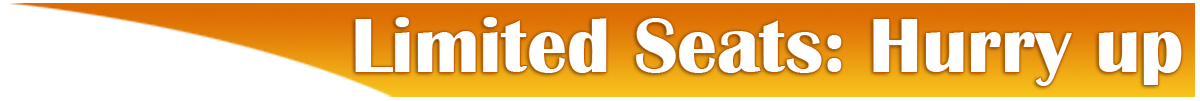
<style>
.page{position:relative;width:1200px;height:101px;background:#ffffff}
.page>*{position:absolute;margin:0}
.t1{font:79.6px "BritannicBold";color:#ffffff}
</style>
<div class="page">
<p class="t1" style="left:355px;top:17px;width:827px;height:69px">Limited Seats: Hurry up</p>
</div>
